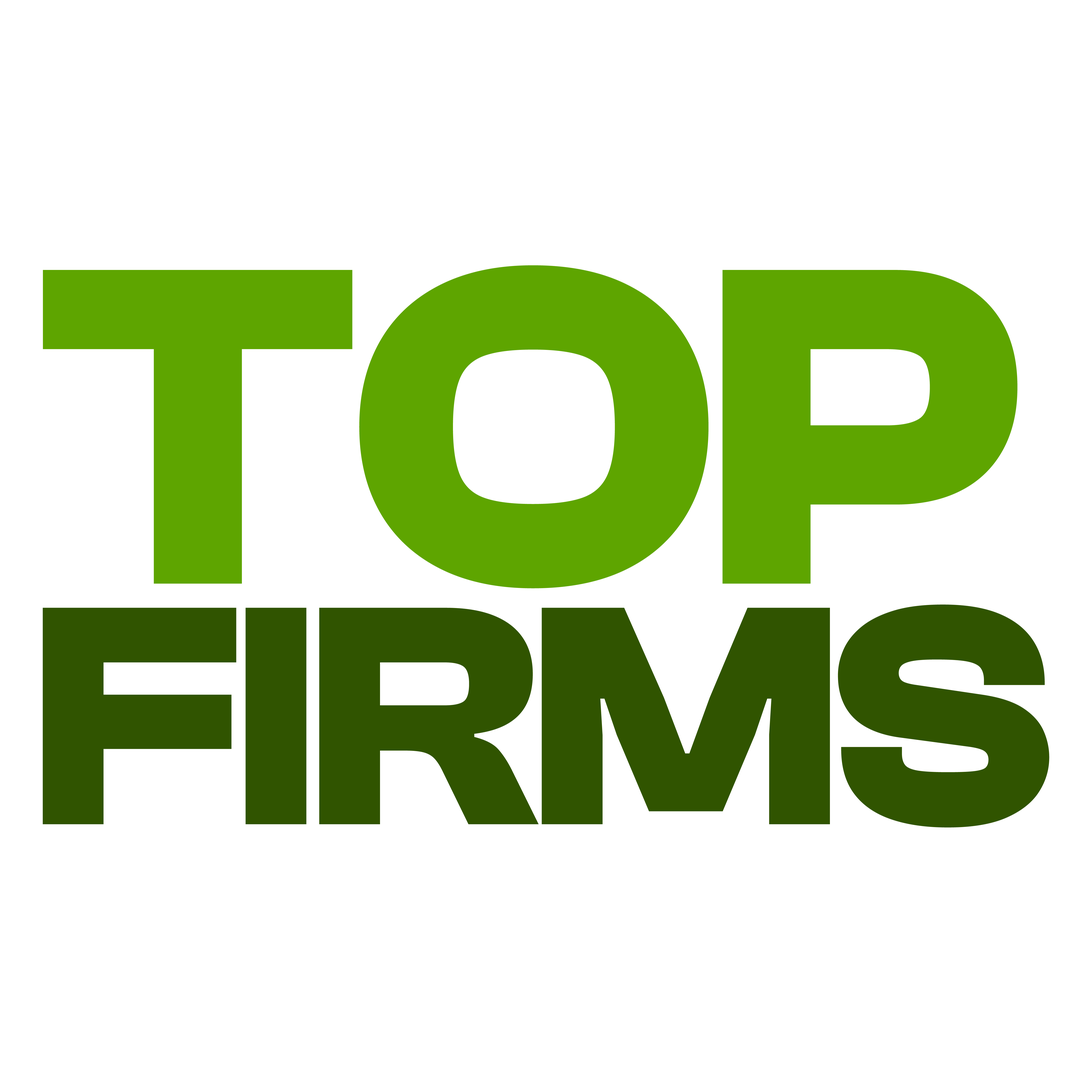
<style>
.page{position:relative;width:1092px;height:1092px;background:#ffffff}
.page>*{position:absolute;margin:0}
.t1{font:468px "ClashDisplayVariable-Bold";letter-spacing:-0.02em;color:#5ea500}
.t2{font:323px "ClashDisplayVariable-Bold";letter-spacing:-0.02em;color:#305400}
</style>
<div class="page">
<p class="t1" style="left:43px;top:265px;width:975px;height:323px">TOP</p>
<p class="t2" style="left:43px;top:605px;width:1006px;height:223px">FIRMS</p>
</div>
